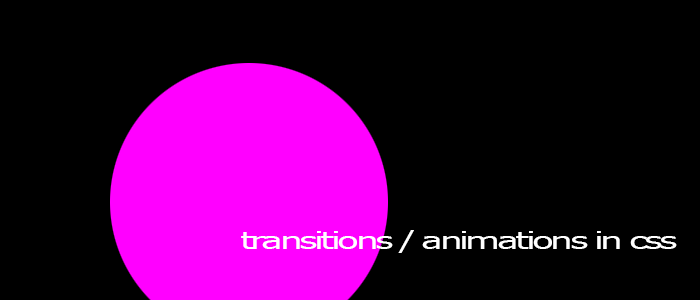
<style>
.page{position:relative;width:700px;height:300px;background:#000000}
.page>*{position:absolute;margin:0}
.t1{font:24px "Verdana";letter-spacing:-0.1em;color:#ffffff;scale:1.51 1}
</style>
<div class="page">
<p class="t1" style="left:241px;top:230px;width:436px;height:23px">transitions / animations in css</p>
</div>
